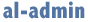
<style>
.page{position:relative;width:88px;height:22px;background:#ffffff}
.page>*{position:absolute;margin:0}
.t1{font:23.9px "AbadiMT-CondensedExtraBold";color:#5275a3}
</style>
<div class="page">
<p class="t1" style="left:3px;top:1px;width:82px;height:18px">al-admin</p>
</div>
